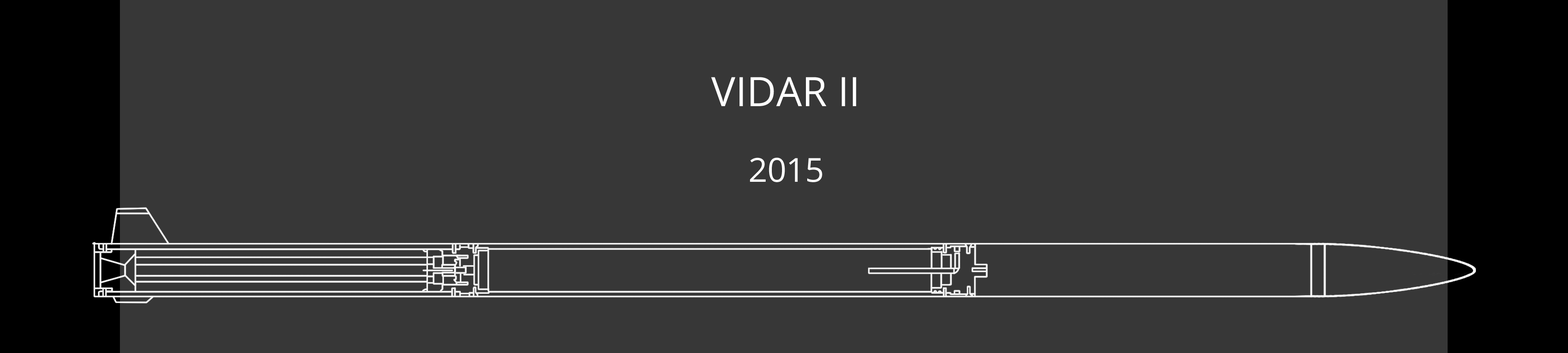
<style>
.page{position:relative;width:1568px;height:353px;background:#373737}
.page>*{position:absolute;margin:0}
.t1{font:40.6px "OpenSans";color:#ffffff}
.t2{font:33.2px "OpenSans";color:#ffffff}
</style>
<div class="page">
<p class="t1" style="left:711px;top:77px;width:145px;height:29px">VIDAR II</p>
<p class="t2" style="left:750px;top:158px;width:72px;height:24px">2015</p>
</div>
